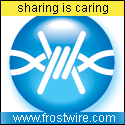
<style>
.page{position:relative;width:125px;height:125px;background:#ffffff}
.page>*{position:absolute;margin:0}
.t1{font:12px "ArialMT";color:#000000}
.t2{font:12px "ArialMT";color:#ffffff}
</style>
<div class="page">
<p class="t1" style="left:18px;top:3px;width:90px;height:11px">sharing is caring</p>
<p class="t2" style="left:13px;top:113px;width:102px;height:9px">www.frostwire.com</p>
</div>
